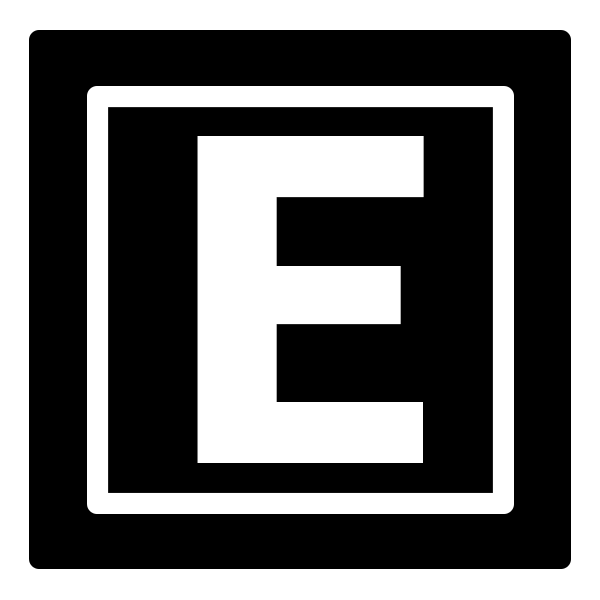
<style>
.page{position:relative;width:600px;height:600px;background:#000000}
.page>*{position:absolute;margin:0}
.t1{font:460px "Roboto-Black";color:#ffffff}
</style>
<div class="page">
<p class="t1" style="left:197px;top:136px;width:227px;height:327px">E</p>
</div>
